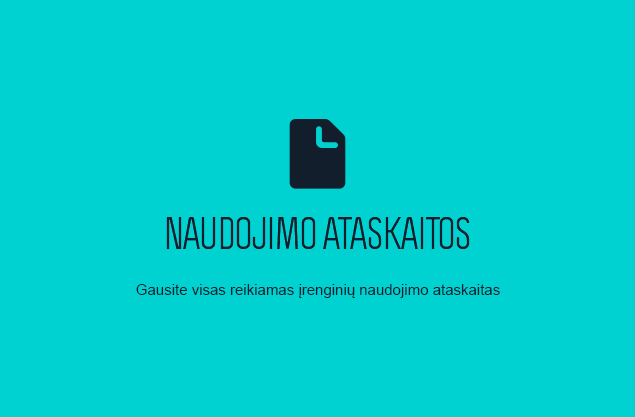
<style>
.page{position:relative;width:635px;height:417px;background:#00d2d2}
.page>*{position:absolute;margin:0}
.t1{font:15px "ArialMT";color:#131e2d}
</style>
<div class="page">
<p class="t1" style="left:136px;top:284px;width:364px;height:14px">Gausite visas reikiamas įrenginių naudojimo ataskaitas</p>
</div>
